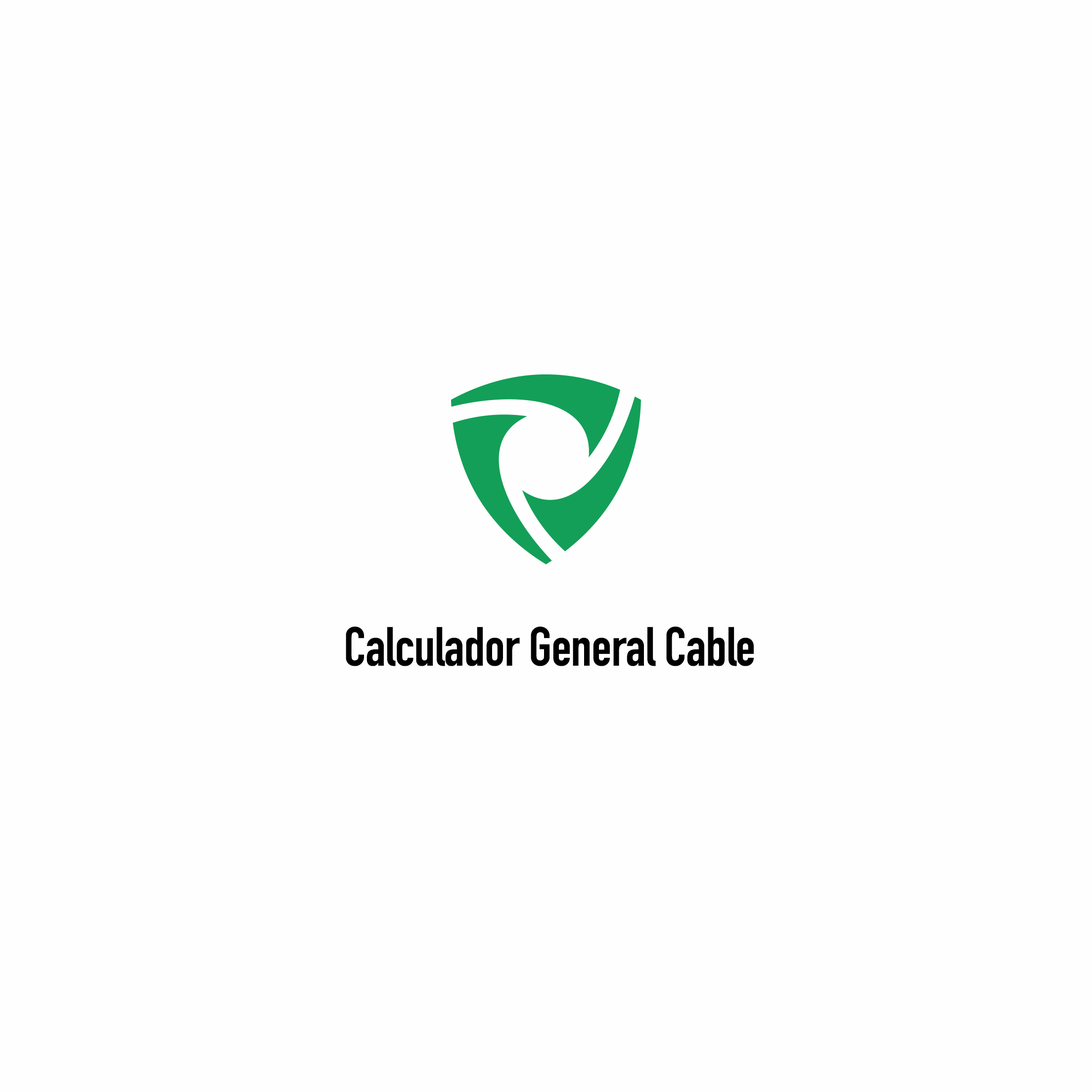
<style>
.page{position:relative;width:1092px;height:1092px;background:#fefefe}
.page>*{position:absolute;margin:0}
.t1{font:54.4px "DINCondensed-Bold";letter-spacing:-0.01em;color:#000000}
</style>
<div class="page">
<p class="t1" style="left:346px;top:627px;width:408px;height:39px">Calculador General Cable</p>
</div>
